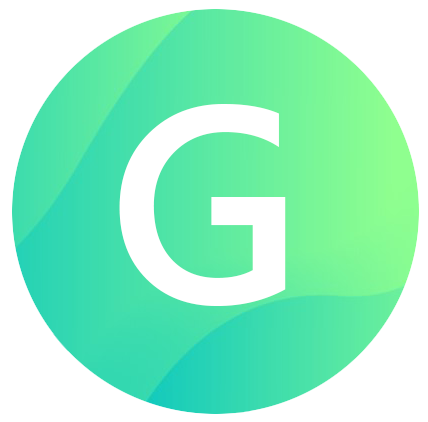
<style>
.page{position:relative;width:428px;height:422px;background:#ffffff}
.page>*{position:absolute;margin:0}
.t1{font:280px "SegoeUI-Semibold";color:#ffffff}
</style>
<div class="page">
<p class="t1" style="left:119px;top:104px;width:167px;height:202px">G</p>
</div>
